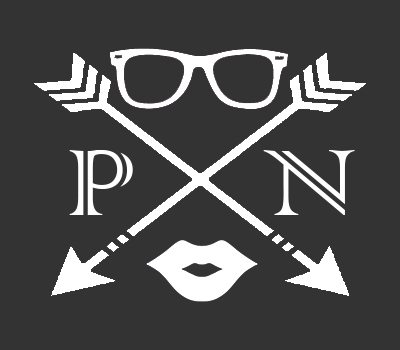
<style>
.page{position:relative;width:400px;height:350px;background:#333333}
.page>*{position:absolute;margin:0}
.t1{font:125px "ColonnaMT";color:#ffffff}
.t2{font:200px "ColonnaMT";color:#ffffff}
</style>
<div class="page">
<p class="t1" style="left:69px;top:150px;width:64px;height:65px">P<span class="t2">P</span></p>
<p class="t1" style="left:263px;top:150px;width:92px;height:65px">N</p>
</div>
